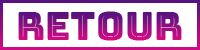
<style>
.page{position:relative;width:200px;height:50px;background:#ffffff}
.page>*{position:absolute;margin:0}
.t1{font:39px "BungeeInline-Regular";text-transform:uppercase}
</style>
<div class="page">
<p class="t1" style="left:18px;top:11px;width:164px;height:30px">retour</p>
</div>
